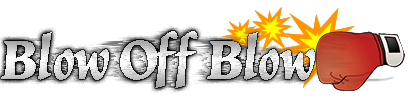
<style>
.page{position:relative;width:410px;height:100px;background:#ffffff}
.page>*{position:absolute;margin:0}
.t1{font:58.3px "Vatican-Bold"}
</style>
<div class="page">
<p class="t1" style="left:1px;top:31px;width:314px;height:57px">Blow Off Blow</p>
</div>
